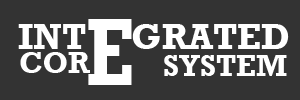
<style>
.page{position:relative;width:300px;height:100px;background:#333333}
.page>*{position:absolute;margin:0}
.t1{font:36px "Rockwell-Bold";color:#ffffff}
.t2{font:97.5px "Rockwell-Bold";color:#ffffff;scale:0.74 1}
.t3{font:30px "Rockwell-Bold";color:#ffffff}
</style>
<div class="page">
<p class="t1" style="left:18px;top:24px;width:271px;height:25px">INT     GRATED</p>
<p class="t2" style="left:88px;top:19px;width:44px;height:66px">E</p>
<p class="t3" style="left:20px;top:52px;width:70px;height:21px">COR</p>
<p class="t3" style="left:164px;top:55px;width:123px;height:21px">SYSTEM</p>
</div>
